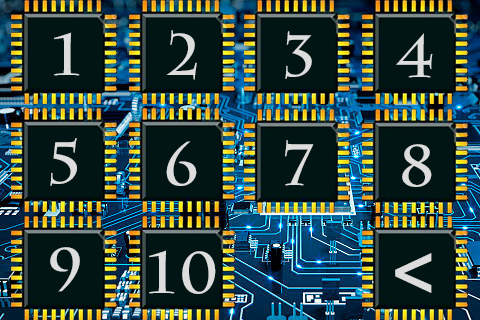
<style>
.page{position:relative;width:480px;height:320px;background:#011514}
.page>*{position:absolute;margin:0}
.t1{font:58.3px "CharlemagneStd-Bold";letter-spacing:0.075em;color:#dddddd}
.t2{font:75px "MyriadPro-Bold";letter-spacing:0.075em;color:#dddddd}
</style>
<div class="page">
<p class="t1" style="left:166px;top:30px;width:31px;height:50px">2</p>
<p class="t1" style="left:54px;top:32px;width:26px;height:44px">1</p>
<p class="t1" style="left:285px;top:31px;width:27px;height:48px">3</p>
<p class="t1" style="left:396px;top:33px;width:37px;height:45px">4</p>
<p class="t1" style="left:50px;top:138px;width:27px;height:48px">5</p>
<p class="t1" style="left:166px;top:141px;width:31px;height:45px">6</p>
<p class="t1" style="left:285px;top:140px;width:29px;height:46px">7</p>
<p class="t1" style="left:402px;top:144px;width:30px;height:43px">8</p>
<p class="t1" style="left:50px;top:247px;width:30px;height:45px">9</p>
<p class="t1" style="left:149px;top:250px;width:67px;height:44px">10</p>
<p class="t2" style="left:395px;top:253px;width:37px;height:40px">&lt;</p>
</div>
